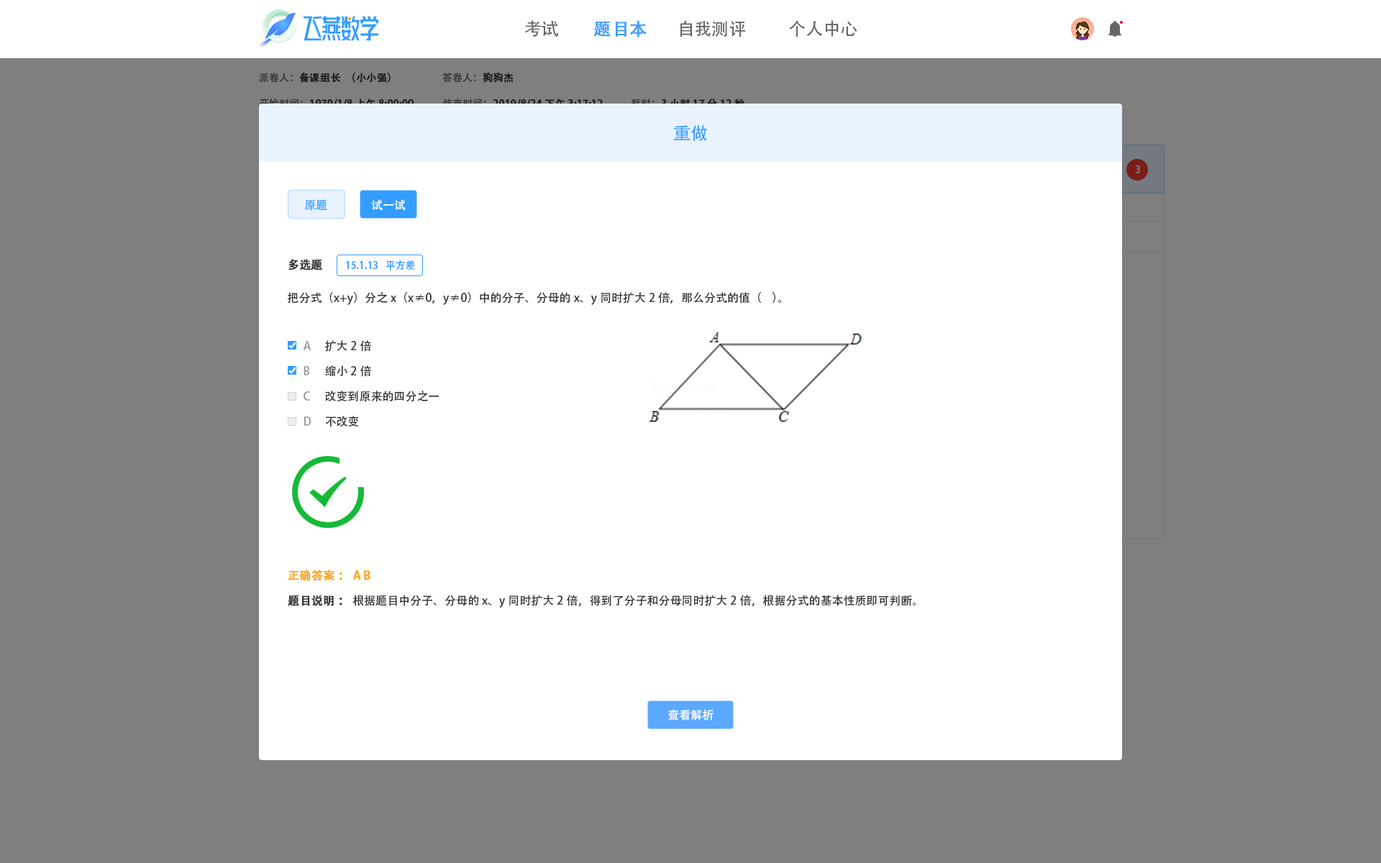
<style>
.page{position:relative;width:1381px;height:863px;background:#ffffff}
.page>*{position:absolute;margin:0}
.t1{font:17.3px "AdobeHeitiStd-Regular";color:#666666}
.t2{font:17.3px "AdobeHeitiStd-Regular";color:#409eff;font-weight:bold}
.t3{font:10.1px "AdobeHeitiStd-Regular";color:#191919;font-weight:bold}
.t4{font:10.1px "AdobeHeitiStd-Regular";color:#191919}
.t5{font:10.1px "AdobeHeitiStd-Regular"}
.t6{font:10.1px "AdobeHeitiStd-Regular";font-weight:bold}
.t7{font:17.3px "AdobeHeitiStd-Regular";color:#339dff}
.t8{font:10.1px "AdobeHeitiStd-Regular";color:#7f7f7f}
.t9{font:11.5px "AdobeHeitiStd-Regular";color:#339dff}
.t10{font:11.5px "AdobeHeitiStd-Regular";color:#ffffff}
.t11{font:11.5px "AdobeHeitiStd-Regular";color:#333333;font-weight:bold}
.t12{font:10.1px "AdobeHeitiStd-Regular";color:#339dff}
.t13{font:11.5px "AdobeHeitiStd-Regular";color:#333333}
.t14{font:11.5px "AdobeHeitiStd-Regular";color:#999999}
.t15{font:11.5px "AdobeHeitiStd-Regular";color:#fea300;font-weight:bold}
</style>
<div class="page">
<p class="t1" style="left:524px;top:20px;width:35px;height:17px">考试</p>
<p class="t2" style="left:594px;top:21px;width:53px;height:16px">题目本</p>
<p class="t1" style="left:680px;top:20px;width:65px;height:17px">自我测评</p>
<p class="t1" style="left:789px;top:20px;width:69px;height:17px">个人中心</p>
<p class="t3" style="left:259px;top:73px;width:132px;height:10px"><span class="t4">派卷人：</span>备课组长（小小强）</p>
<p class="t5" style="left:442px;top:72px;width:72px;height:11px">答卷人：<span class="t6">狗狗杰</span></p>
<p class="t7" style="left:674px;top:125px;width:33px;height:16px">重做</p>
<p class="t8" style="left:1135px;top:165px;width:5px;height:8px">3</p>
<p class="t9" style="left:304px;top:199px;width:23px;height:12px">原题</p>
<p class="t10" style="left:371px;top:199px;width:35px;height:12px">试一试</p>
<p class="t11" style="left:288px;top:259px;width:35px;height:11px">多选题</p>
<p class="t12" style="left:346px;top:260px;width:69px;height:10px">15.1.13   平方差</p>
<p class="t13" style="left:288px;top:292px;width:493px;height:13px">把分式（x+y）分之x（x≠0，y≠0）中的分子、分母的x、y同时扩大2倍，那么分式的值（    ）。</p>
<p class="t14" style="left:304px;top:341px;width:7px;height:9px">A</p>
<p class="t13" style="left:325px;top:340px;width:46px;height:12px">扩大2倍</p>
<p class="t13" style="left:325px;top:365px;width:46px;height:12px">缩小2倍</p>
<p class="t14" style="left:304px;top:366px;width:6px;height:10px">B</p>
<p class="t14" style="left:304px;top:391px;width:6px;height:10px">C</p>
<p class="t13" style="left:325px;top:391px;width:114px;height:11px">改变到原来的四分之一</p>
<p class="t14" style="left:304px;top:417px;width:8px;height:9px">D</p>
<p class="t13" style="left:325px;top:416px;width:34px;height:11px">不改变</p>
<p class="t15" style="left:288px;top:570px;width:82px;height:11px">正确答案： A B</p>
<p class="t13" style="left:288px;top:595px;width:628px;height:13px"><span class="t11">题目说明： </span>根据题目中分子、分母的x、y同时扩大2倍，得到了分子和分母同时扩大2倍，根据分式的基本性质即可判断。</p>
<p class="t10" style="left:668px;top:709px;width:46px;height:12px">查看解析</p>
</div>
